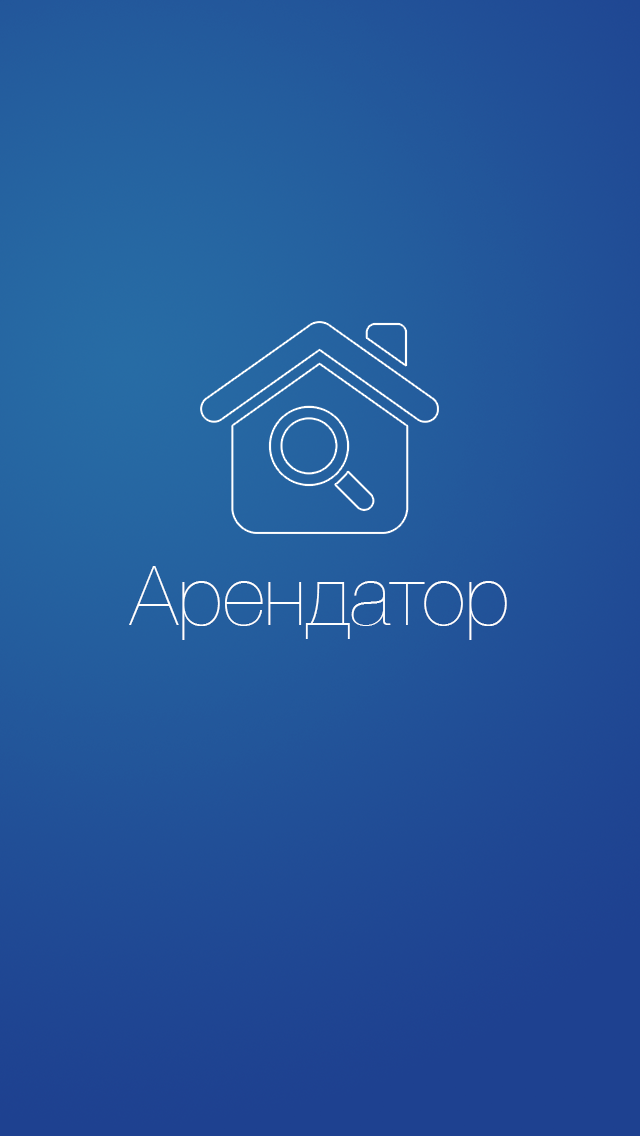
<style>
.page{position:relative;width:640px;height:1136px}
.page>*{position:absolute;margin:0}
.t1{font:83.3px "HelveticaNeue-UltraLight";color:#ffffff}
</style>
<div class="page">
<p class="t1" style="left:129px;top:566px;width:378px;height:74px">Арендатор</p>
</div>
